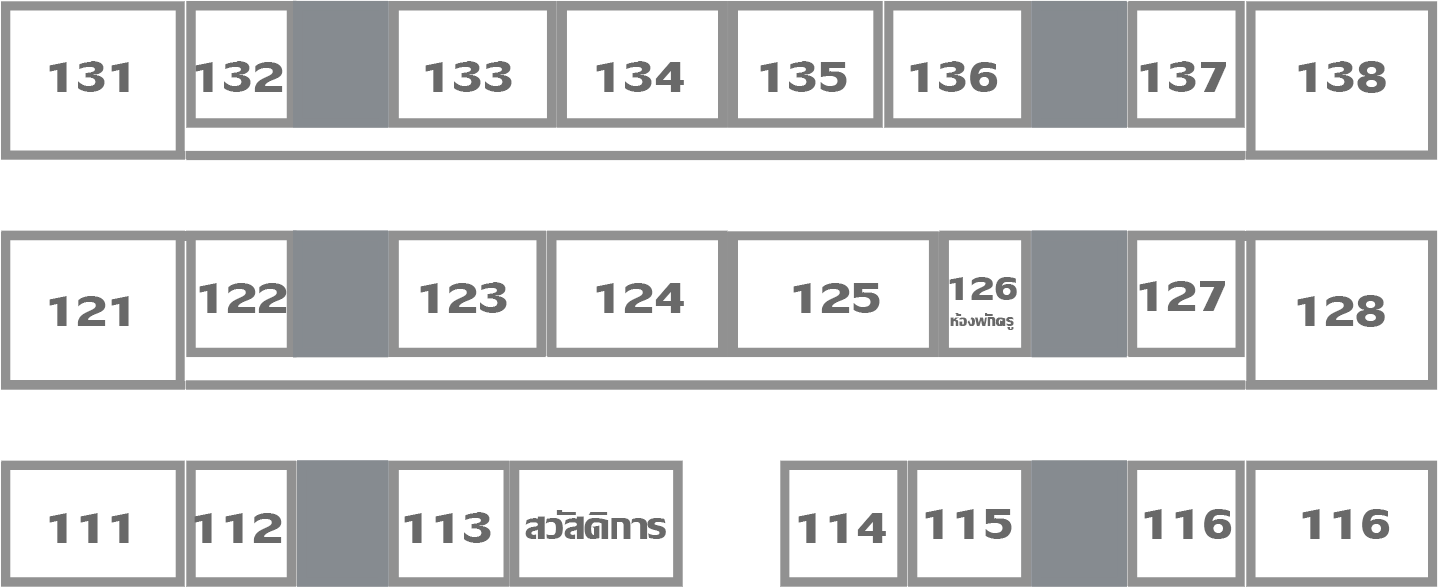
<style>
.page{position:relative;width:1438px;height:587px;background:#ffffff}
.page>*{position:absolute;margin:0}
.t1{font:64.2px "LilyUPCBold";color:#696969}
.t2{font:21.3px "LilyUPCBold";color:#696969}
.t3{font:49.7px "LilyUPCBold";color:#696969}
.t4{font:51.7px "LilyUPCBold";color:#696969}
</style>
<div class="page">
<p class="t1" style="left:49px;top:61px;width:80px;height:31px">131</p>
<p class="t1" style="left:195px;top:61px;width:88px;height:31px">132</p>
<p class="t1" style="left:425px;top:61px;width:87px;height:31px">133</p>
<p class="t1" style="left:596px;top:61px;width:88px;height:31px">134</p>
<p class="t1" style="left:760px;top:61px;width:87px;height:31px">135</p>
<p class="t1" style="left:910px;top:61px;width:88px;height:31px">136</p>
<p class="t1" style="left:1140px;top:61px;width:86px;height:31px">137</p>
<p class="t1" style="left:1298px;top:61px;width:88px;height:32px">138</p>
<p class="t2" style="left:949px;top:277px;width:68px;height:53px;text-align:center"><span class="t3">126<br></span>ห้องพักครู</p>
<p class="t1" style="left:1139px;top:281px;width:86px;height:30px">127</p>
<p class="t1" style="left:199px;top:283px;width:88px;height:30px">122</p>
<p class="t1" style="left:420px;top:282px;width:87px;height:31px">123</p>
<p class="t1" style="left:596px;top:283px;width:88px;height:30px">124</p>
<p class="t1" style="left:793px;top:283px;width:87px;height:30px">125</p>
<p class="t1" style="left:49px;top:296px;width:80px;height:30px">121</p>
<p class="t1" style="left:1297px;top:295px;width:88px;height:32px">128</p>
<p class="t4" style="left:525px;top:510px;width:141px;height:29px">สวัสดิการ</p>
<p class="t1" style="left:925px;top:509px;width:87px;height:30px">115</p>
<p class="t1" style="left:1144px;top:509px;width:88px;height:30px">116</p>
<p class="t1" style="left:1302px;top:509px;width:88px;height:30px">116</p>
<p class="t1" style="left:49px;top:513px;width:80px;height:30px">111</p>
<p class="t1" style="left:194px;top:513px;width:88px;height:30px">112</p>
<p class="t1" style="left:404px;top:512px;width:87px;height:31px">113</p>
<p class="t1" style="left:798px;top:513px;width:88px;height:30px">114</p>
</div>
